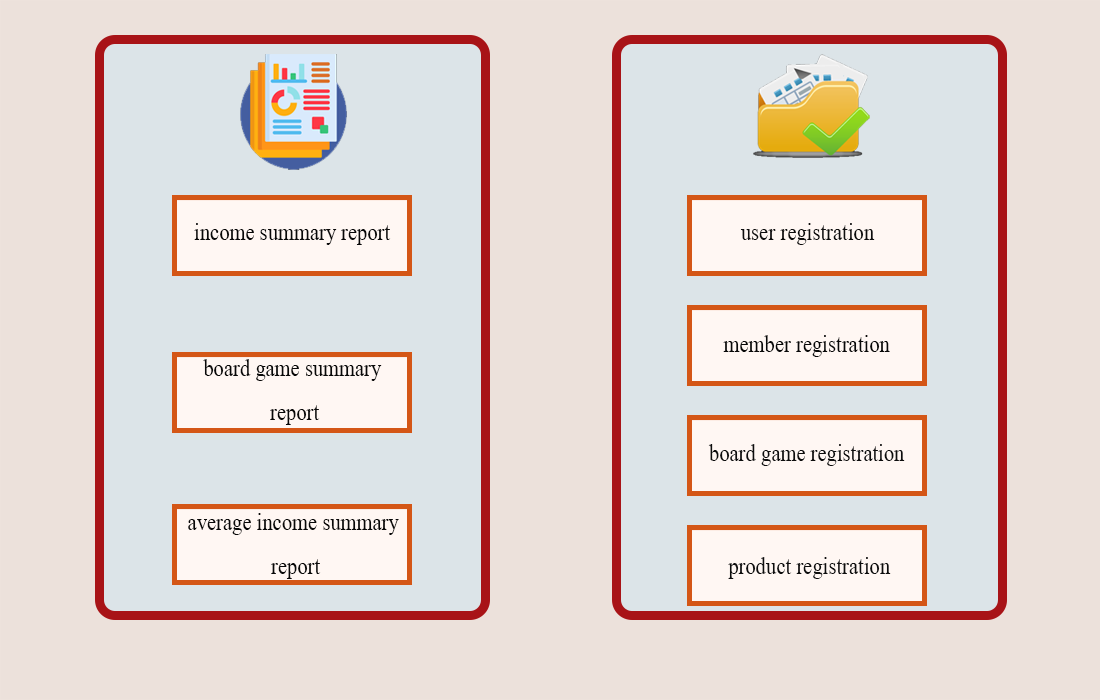
<style>
.page{position:relative;width:1100px;height:700px;background:#ece1db}
.page>*{position:absolute;margin:0}
.t1{font:36.8px "AngsanaUPC";letter-spacing:0.005em;color:#080808;scale:0.83 1}
.t2{font:36.8px "AngsanaUPC";letter-spacing:0.005em;color:#0d0d0d;scale:0.83 1}
</style>
<div class="page">
<p class="t1" style="left:194px;top:223px;width:197px;height:22px">income summary report</p>
<p class="t2" style="left:740px;top:223px;width:135px;height:22px">user registration</p>
<p class="t1" style="left:723px;top:335px;width:167px;height:22px">member registration</p>
<p class="t1" style="left:203px;top:359px;width:179px;height:66px;text-align:center">board game summary <br>report</p>
<p class="t2" style="left:708px;top:444px;width:197px;height:22px">board game registration</p>
<p class="t1" style="left:188px;top:513px;width:211px;height:66px;text-align:center">average income summary<br> report</p>
<p class="t2" style="left:728px;top:557px;width:163px;height:22px">product registration</p>
</div>
